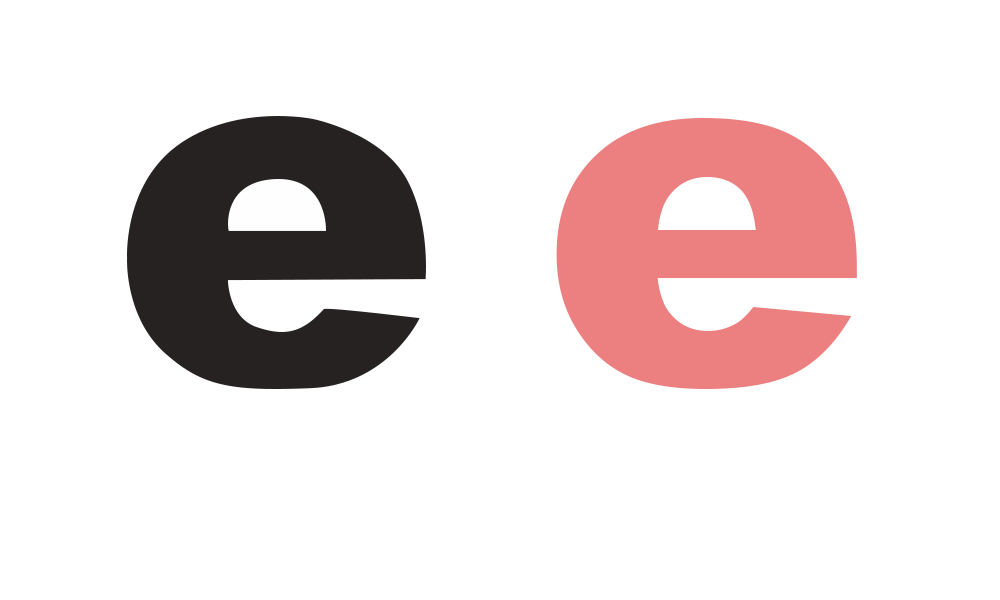
<style>
.page{position:relative;width:1000px;height:600px;background:#ffffff}
.page>*{position:absolute;margin:0}
.t1{font:500px "Arial-Black";color:#ec7f7f}
</style>
<div class="page">
<p class="t1" style="left:556px;top:118px;width:301px;height:271px">e</p>
</div>
